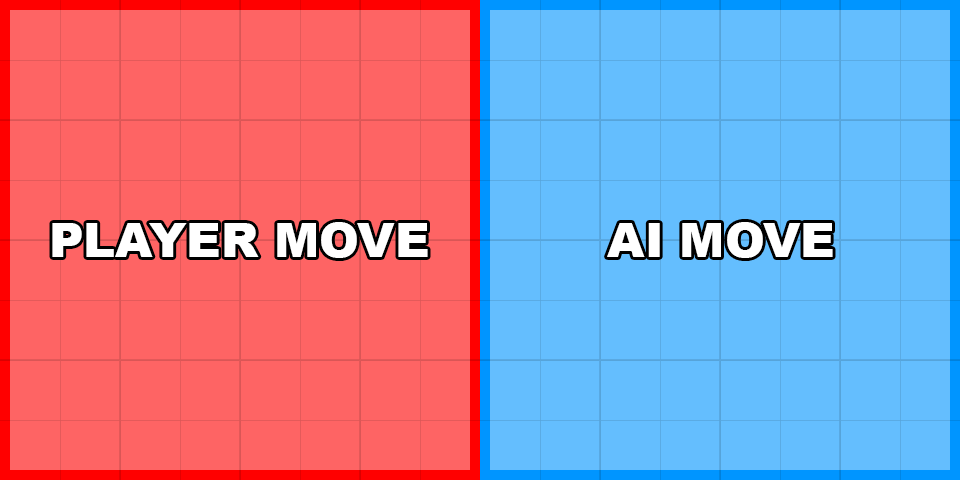
<style>
.page{position:relative;width:960px;height:480px;background:#64befe}
.page>*{position:absolute;margin:0}
.t1{font:48px "Arial-Black";color:#ffffff}
</style>
<div class="page">
<p class="t1" style="left:52px;top:222px;width:376px;height:36px">PLAYER MOVE</p>
<p class="t1" style="left:607px;top:222px;width:226px;height:36px">AI MOVE</p>
</div>
